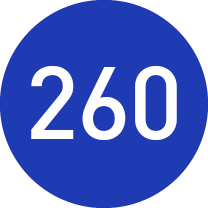
<style>
.page{position:relative;width:208px;height:208px;background:#1f3bb3}
.page>*{position:absolute;margin:0}
.t1{font:100.9px "DIN-Medium";letter-spacing:-0.02em;color:#fffeff}
</style>
<div class="page">
<p class="t1" style="left:31px;top:66px;width:146px;height:74px">260</p>
</div>
